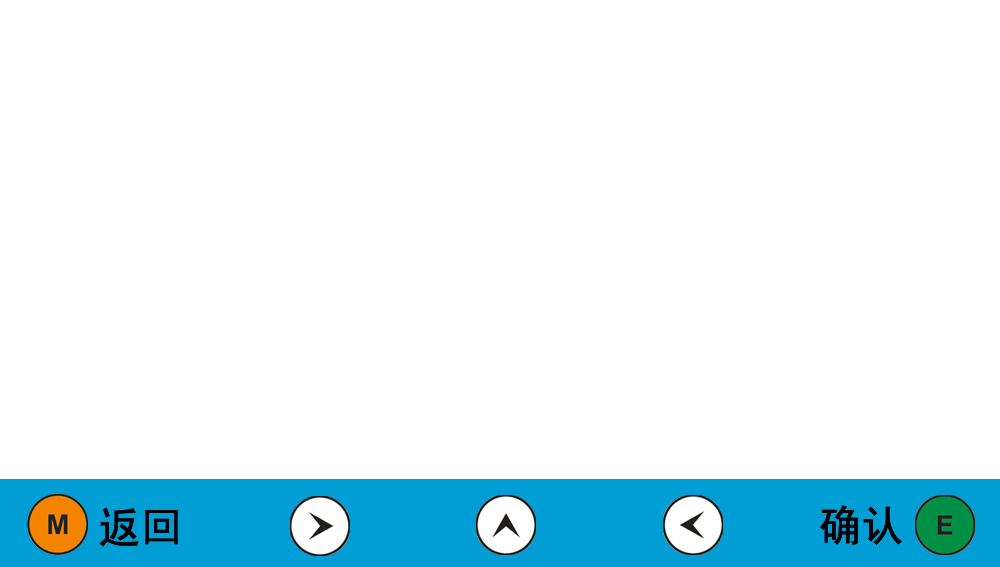
<style>
.page{position:relative;width:1000px;height:567px;background:#ffffff}
.page>*{position:absolute;margin:0}
.t1{font:41.7px "SimHei";color:#000000;font-weight:bold}
</style>
<div class="page">
<p class="t1" style="left:99px;top:508px;width:79px;height:39px">返回</p>
<p class="t1" style="left:99px;top:508px;width:79px;height:39px">返回</p>
<p class="t1" style="left:820px;top:505px;width:82px;height:40px">确认</p>
<p class="t1" style="left:820px;top:505px;width:82px;height:40px">确认</p>
<p class="t1" style="left:820px;top:505px;width:82px;height:40px">确认</p>
</div>
